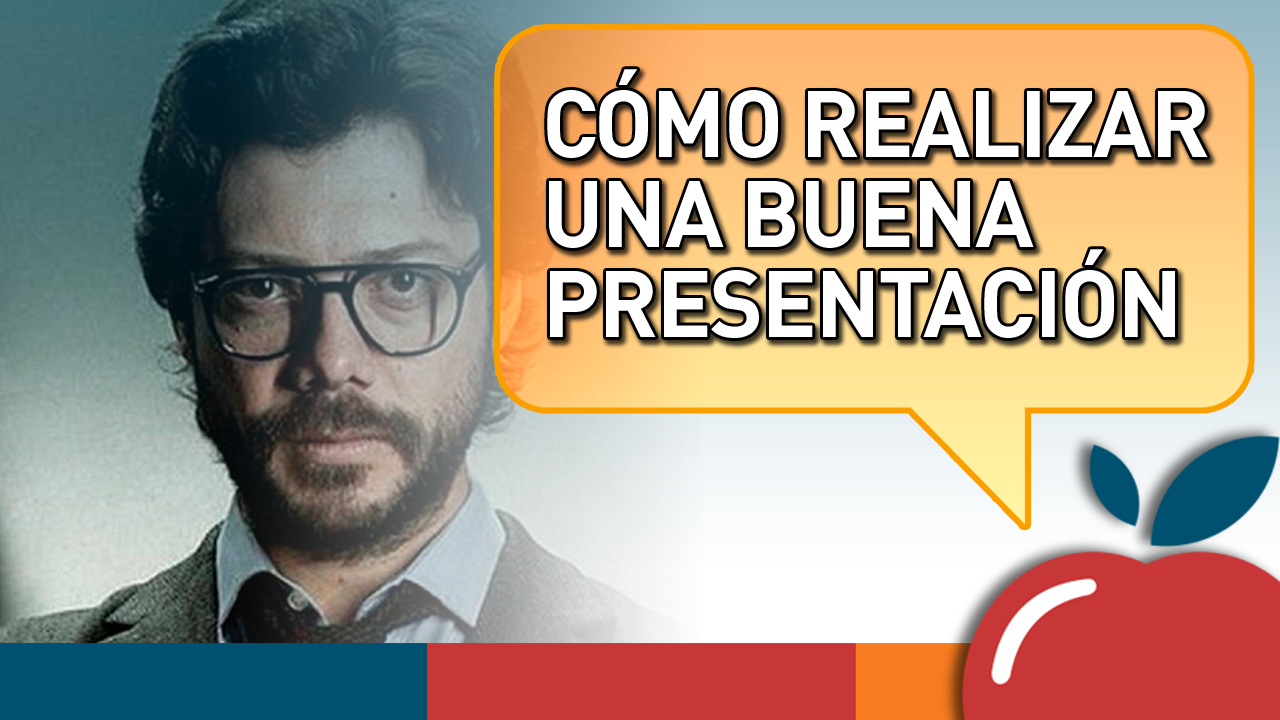
<style>
.page{position:relative;width:1280px;height:720px}
.page>*{position:absolute;margin:0}
.t1{font:92.3px/90px "DINPro-Bold";letter-spacing:-0.025em;color:#ffffff;text-transform:uppercase}
</style>
<div class="page">
<p class="t1" style="left:547px;top:69px;width:661px;height:269px">Cómo REALIZAR <br>una buena <br>presentación</p>
</div>
